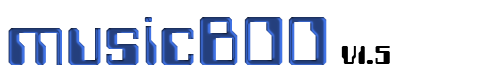
<style>
.page{position:relative;width:500px;height:78px;background:#ffffff}
.page>*{position:absolute;margin:0}
.t1{font:80px "Computerfont"}
.t2{font:30px "Computerfont";color:#000000}
</style>
<div class="page">
<p class="t1" style="left:8px;top:17px;width:319px;height:48px">musicBOO</p>
<p class="t2" style="left:341px;top:46px;width:49px;height:18px">V1.5</p>
</div>
